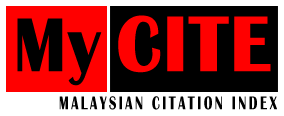
<style>
.page{position:relative;width:284px;height:116px;background:#000000}
.page>*{position:absolute;margin:0}
.t1{font:79.2px "BritannicBold";letter-spacing:0.025em;color:#ff0000;text-transform:uppercase;font-weight:bold;scale:0.91 1}
.t2{font:79.2px "BritannicBold";letter-spacing:0.025em;color:#000000;scale:0.91 1}
.t3{font:19.2px "BritannicBold";letter-spacing:0.19em;color:#000000;text-transform:uppercase;scale:0.69 1}
</style>
<div class="page">
<p class="t1" style="left:118px;top:15px;width:153px;height:58px">CITE</p>
<p class="t2" style="left:17px;top:18px;width:85px;height:68px">My</p>
<p class="t3" style="left:59px;top:96px;width:218px;height:14px">Malaysian citation index</p>
</div>
